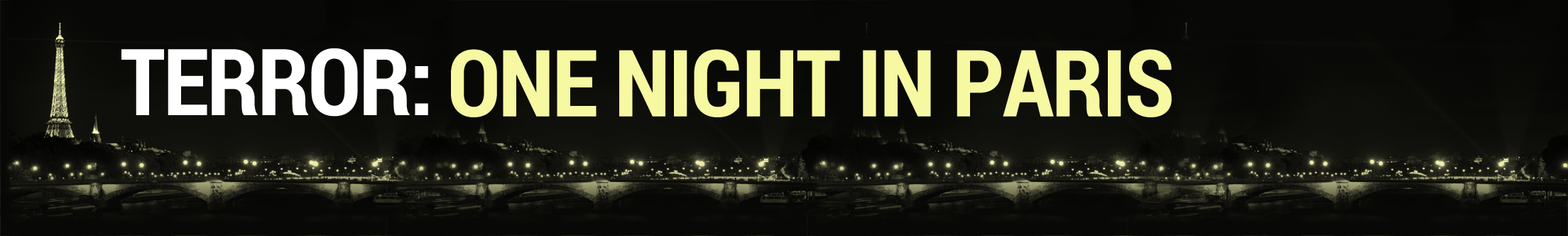
<style>
.page{position:relative;width:1568px;height:236px;background:#080806}
.page>*{position:absolute;margin:0}
.t1{font:92.5px "RobotoCondensed-Bold";letter-spacing:-0.02em;color:#ffffff}
.t2{font:92.5px "RobotoCondensed-Bold";letter-spacing:-0.02em;color:#f7f8a2}
</style>
<div class="page">
<p class="t1" style="left:121px;top:48px;width:307px;height:68px">TERROR:</p>
<p class="t2" style="left:451px;top:49px;width:721px;height:68px">ONE NIGHT IN PARIS</p>
</div>
